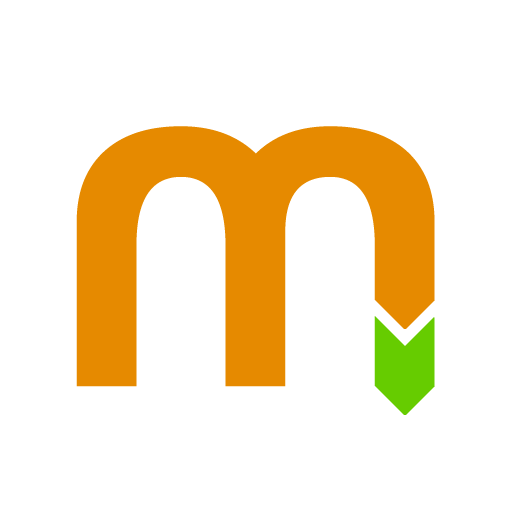
<style>
.page{position:relative;width:512px;height:512px;background:#ffffff}
.page>*{position:absolute;margin:0}
.t1{font:480px "SoulPapa";color:#e68a00;text-transform:uppercase}
</style>
<div class="page">
<p class="t1" style="left:76px;top:126px;width:359px;height:261px">m</p>
</div>
